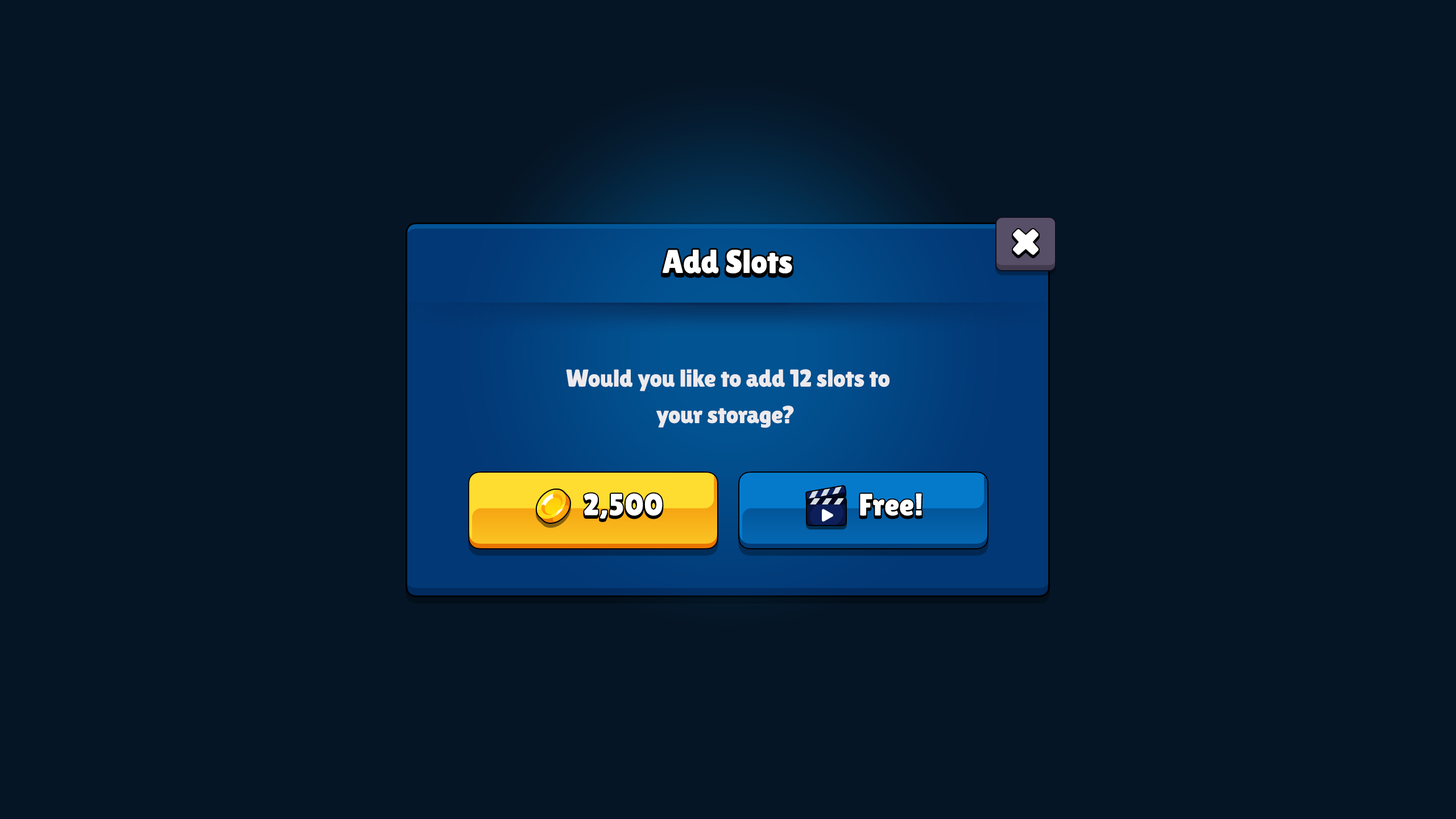
<style>
.page{position:relative;width:1456px;height:819px;background:#051525}
.page>*{position:absolute;margin:0}
.t1{font:33px "LilitaOne";color:#ffffff}
.t2{font:24.3px/36.4px "LilitaOne";color:#eceaed}
.t3{font:30.7px "LilitaOne";letter-spacing:0.02em;color:#ffffff}
</style>
<div class="page">
<p class="t1" style="left:662px;top:250px;width:130px;height:24px">Add Slots</p>
<p class="t2" style="left:566px;top:369px;width:324px;height:59px;text-align:center">Would you like to add 12 slots to<br>your storage?</p>
<p class="t3" style="left:584px;top:493px;width:79px;height:26px">2,500</p>
<p class="t3" style="left:860px;top:493px;width:62px;height:23px">Free!</p>
</div>
